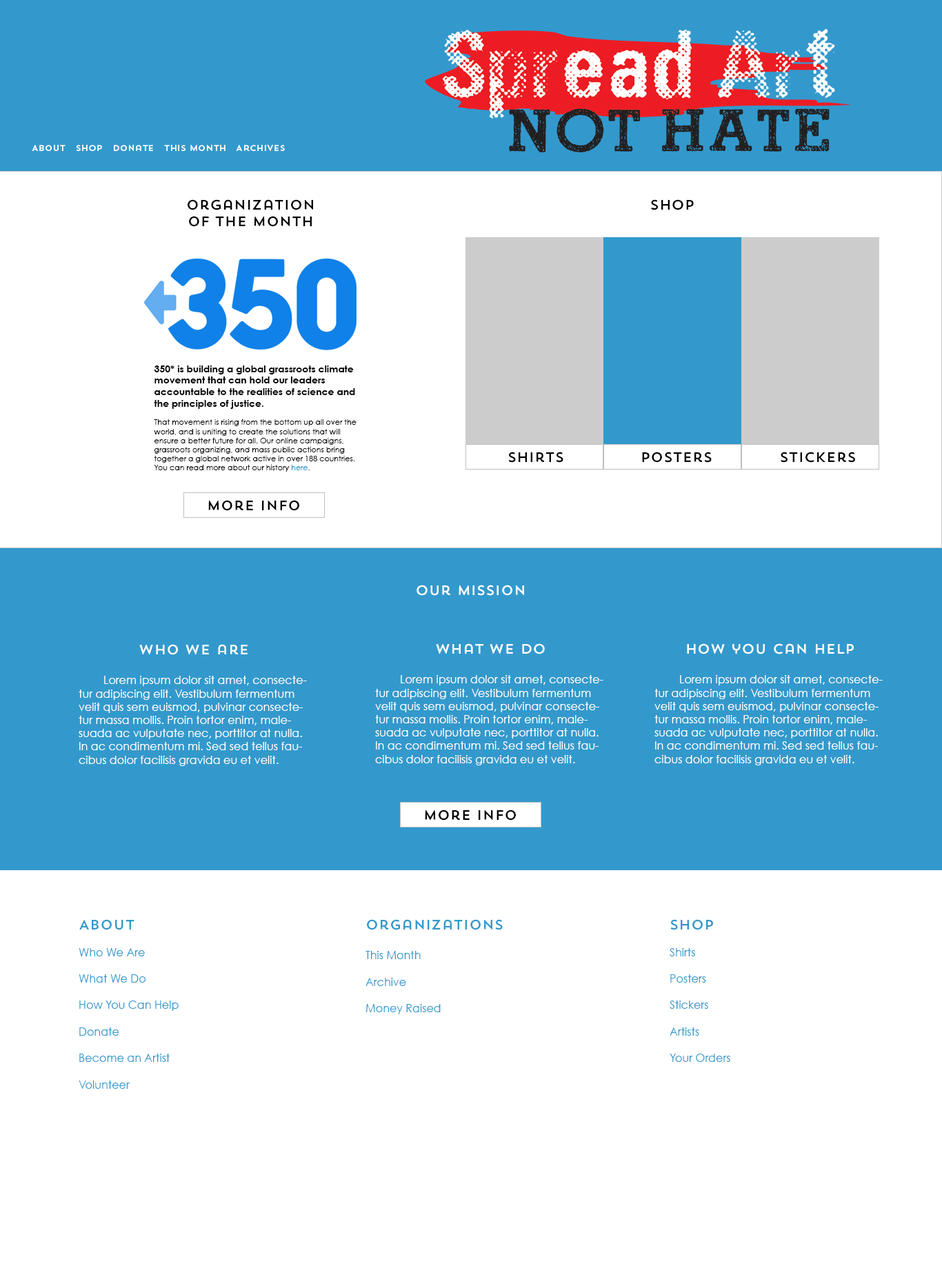
<style>
.page{position:relative;width:942px;height:1266px;background:#ffffff}
.page>*{position:absolute;margin:0}
.t1{font:8.3px "TrendSansOne";color:#ffffff}
.t2{font:13.8px "TrendSansOne";color:#000000}
.t3{font:7.6px "CenturyGothic";color:#000000}
.t4{font:9.7px "CenturyGothic-Bold";color:#000000}
.t5{font:7.6px "CenturyGothic";color:#3399cc}
.t6{font:13.8px "TrendSansOne";color:#ffffff}
.t7{font:11px "CenturyGothic";color:#ffffff}
.t8{font:11px "CenturyGothic";color:#3399cc}
.t9{font:13.8px "TrendSansOne";color:#3399cc}
</style>
<div class="page">
<p class="t1" style="left:32px;top:145px;width:253px;height:6px">About   Shop   Donate   This Month   Archives</p>
<p class="t2" style="left:188px;top:199px;width:125px;height:28px;text-align:center">Organization<br>of the Month</p>
<p class="t2" style="left:651px;top:199px;width:43px;height:11px">shop</p>
<p class="t3" style="left:154px;top:365px;width:202px;height:107px"><span class="t4">350* is building a global grassroots climate movement that can hold our leaders accountable to the realities of science and the principles of justice.<br></span><br>That movement is rising from the bottom up all over the world, and is uniting to create the solutions that will ensure a better future for all. Our online campaigns, grassroots organizing, and mass public actions bring together a global network active in over 188 countries. You can read more about our history <span class="t5">here</span>.</p>
<p class="t2" style="left:508px;top:452px;width:55px;height:11px">Shirts</p>
<p class="t2" style="left:642px;top:452px;width:70px;height:11px">Posters</p>
<p class="t2" style="left:781px;top:452px;width:74px;height:11px">Stickers</p>
<p class="t2" style="left:208px;top:500px;width:91px;height:11px">More Info</p>
<p class="t6" style="left:416px;top:585px;width:108px;height:11px">Our Mission</p>
<p class="t7" style="left:79px;top:644px;width:228px;height:122px;text-align:center"><span class="t6">who we are<br><br></span> Lorem ipsum dolor sit amet, consectetur adipiscing elit. Vestibulum fermentum velit quis sem euismod, pulvinar consectetur massa mollis. Proin tortor enim, malesuada ac vulputate nec, porttitor at nulla. In ac condimentum mi. Sed sed tellus faucibus dolor facilisis gravida eu et velit.</p>
<p class="t7" style="left:375px;top:643px;width:228px;height:122px;text-align:center"><span class="t6">What we do<br><br></span> Lorem ipsum dolor sit amet, consectetur adipiscing elit. Vestibulum fermentum velit quis sem euismod, pulvinar consectetur massa mollis. Proin tortor enim, malesuada ac vulputate nec, porttitor at nulla. In ac condimentum mi. Sed sed tellus faucibus dolor facilisis gravida eu et velit.</p>
<p class="t7" style="left:654px;top:643px;width:229px;height:122px;text-align:center"><span class="t6">How you can help<br><br></span> Lorem ipsum dolor sit amet, consectetur adipiscing elit. Vestibulum fermentum velit quis sem euismod, pulvinar consectetur massa mollis. Proin tortor enim, malesuada ac vulputate nec, porttitor at nulla. In ac condimentum mi. Sed sed tellus faucibus dolor facilisis gravida eu et velit.</p>
<p class="t2" style="left:425px;top:810px;width:91px;height:11px">More Info</p>
<p class="t8" style="left:79px;top:919px;width:100px;height:170px"><span class="t9">About<br></span><br>Who We Are<br><br>What We Do<br><br>How You Can Help<br><br>Donate<br><br>Become an Artist<br><br>Volunteer</p>
<p class="t8" style="left:365px;top:919px;width:138px;height:95px"><span class="t9">Organizations<br><br></span>This Month<br><br>Archive<br><br>Money Raised</p>
<p class="t8" style="left:670px;top:919px;width:60px;height:143px"><span class="t9">Shop<br></span><br>Shirts<br><br>Posters<br><br>Stickers<br><br>Artists<br><br>Your Orders</p>
</div>
